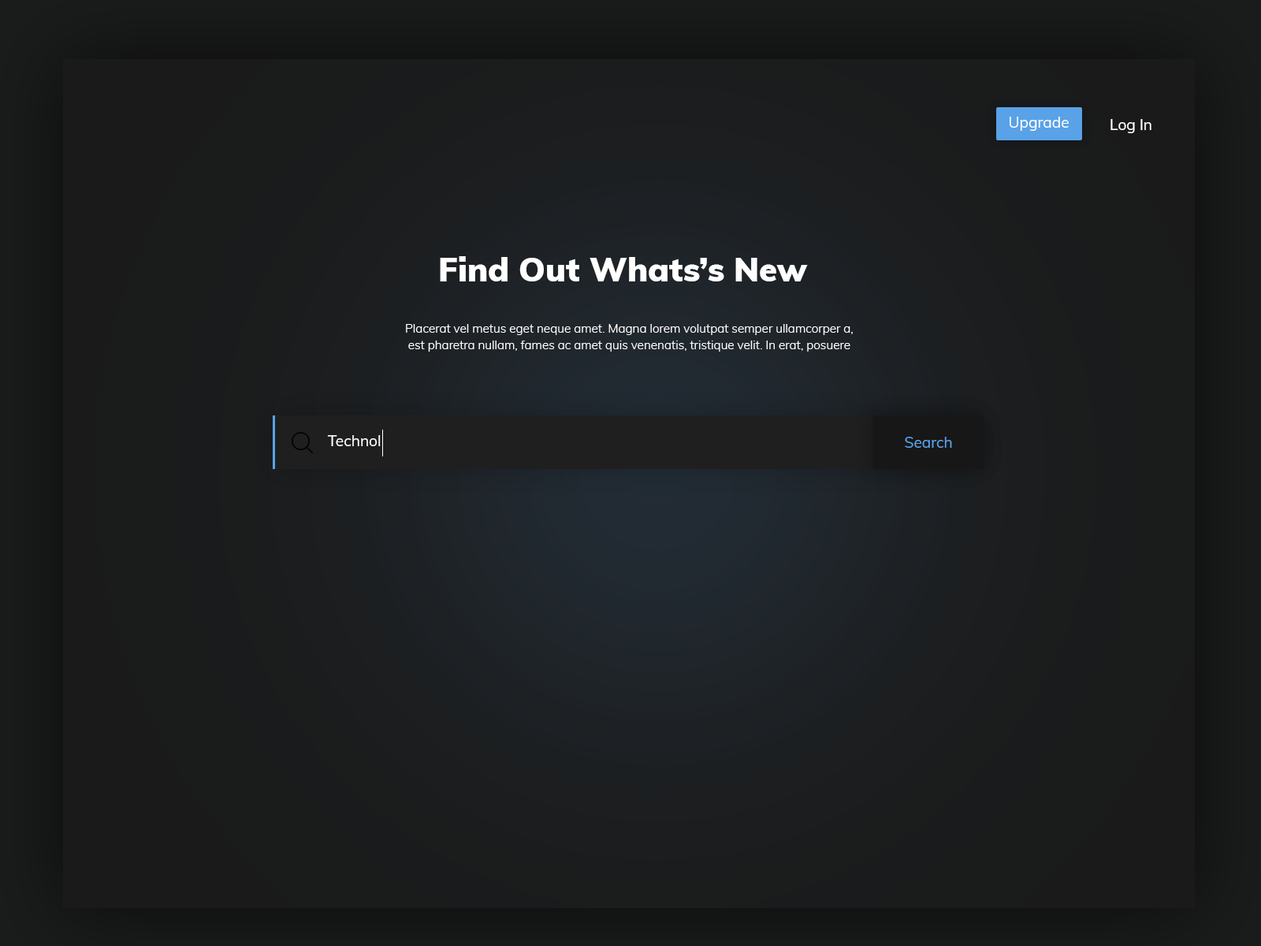
<style>
.page{position:relative;width:1261px;height:946px}
.page>*{position:absolute;margin:0}
.t1{font:15.1px "Muli-Regular";color:#ffffff}
.t2{font:33.2px "Muli-Black";color:#ffffff}
.t3{font:12.1px/16.6px "Muli-Light";color:#ffffff}
.t4{font:15.1px "Muli-Regular";color:#59a2e7}
</style>
<div class="page">
<p class="t1" style="left:1010px;top:117px;width:59px;height:14px">Upgrade</p>
<p class="t1" style="left:1110px;top:119px;width:41px;height:14px">Log In</p>
<p class="t2" style="left:440px;top:256px;width:368px;height:25px">Find Out Whats’s New</p>
<p class="t3" style="left:406px;top:324px;width:447px;height:27px;text-align:center">Placerat vel metus eget neque amet. Magna lorem volutpat semper ullamcorper a, est pharetra nullam, fames ac amet quis venenatis, tristique velit. In erat, posuere</p>
<p class="t1" style="left:327px;top:435px;width:54px;height:11px">Technol</p>
<p class="t4" style="left:905px;top:437px;width:47px;height:11px">Search</p>
</div>
